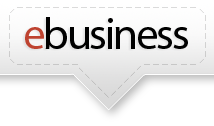
<style>
.page{position:relative;width:214px;height:126px;background:#ffffff}
.page>*{position:absolute;margin:0}
.t1{font:45px "MyriadPro-Regular";letter-spacing:-0.05em;color:#000000}
.t2{font:45px "MyriadPro-Regular";letter-spacing:-0.05em;color:#be4330}
</style>
<div class="page">
<p class="t1" style="left:25px;top:17px;width:163px;height:32px"><span class="t2">e</span>business</p>
</div>
